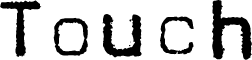
<style>
.page{position:relative;width:252px;height:60px;background:#ffffff}
.page>*{position:absolute;margin:0}
.t1{font:89.1px "Magda-Plain";letter-spacing:0.02em;color:#000000}
.t2{font:89.1px "Magda-Light";letter-spacing:0.02em;color:#000000}
.t3{font:89.1px "Magda-Plain";letter-spacing:0.06em;color:#000000}
.t4{font:89.1px "Magda-Light";letter-spacing:0.06em;color:#000000}
.t5{font:89.1px "Magda-Plain";letter-spacing:0.2em;color:#000000}
</style>
<div class="page">
<p class="t1" style="left:0px;top:0px;width:252px;height:60px">T<span class="t2">o</span><span class="t3">u</span><span class="t4">c</span><span class="t5">h</span></p>
</div>
